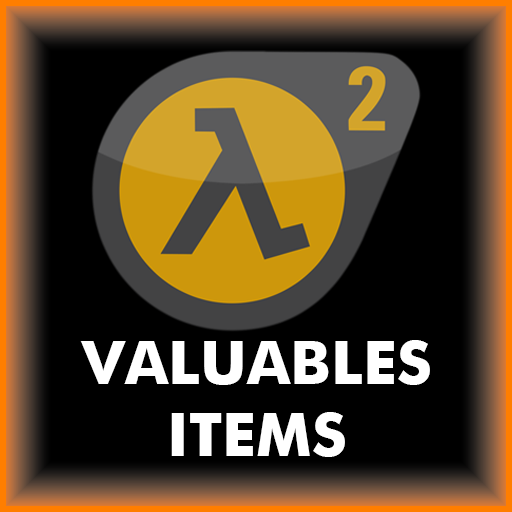
<style>
.page{position:relative;width:512px;height:512px;background:#000000}
.page>*{position:absolute;margin:0}
.t1{font:60px "Futura-Bold";color:#ffffff}
</style>
<div class="page">
<p class="t1" style="left:80px;top:340px;width:350px;height:117px;text-align:center">VALUABLES<br>ITEMS</p>
</div>
